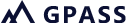
<style>
.page{position:relative;width:128px;height:23px;background:#ffffff}
.page>*{position:absolute;margin:0}
.t1{font:24.1px "MicrosoftPhagsPa-Bold";letter-spacing:0.08em;color:#0b1033}
</style>
<div class="page">
<p class="t1" style="left:43px;top:6px;width:83px;height:18px">GPASS</p>
</div>
